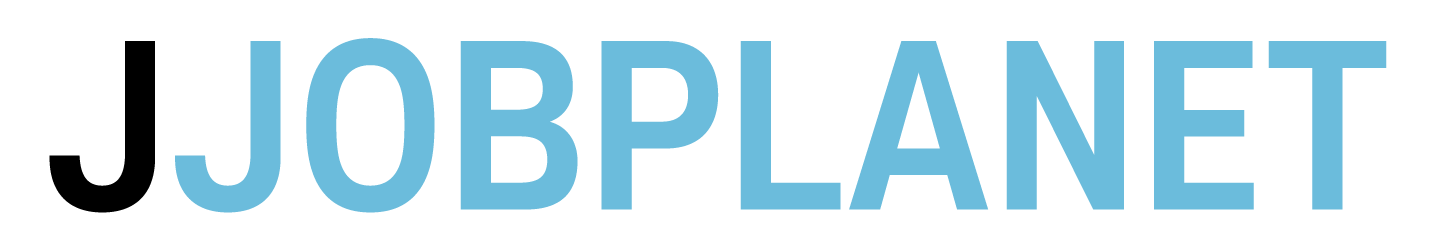
<style>
.page{position:relative;width:1440px;height:252px;background:#ffffff}
.page>*{position:absolute;margin:0}
.t1{font:212.6px "S-CoreDream-6Bold";letter-spacing:0.02em;color:#6bbcdc;scale:0.96 1}
.t2{font:212.6px "S-CoreDream-6Bold";letter-spacing:0.02em;color:#000000;scale:0.96 1}
</style>
<div class="page">
<p class="t1" style="left:49px;top:38px;width:1338px;height:175px"><span class="t2">J</span>JOBPLANET</p>
</div>
